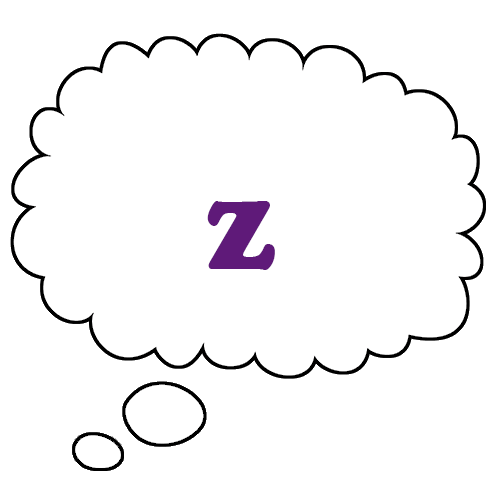
<style>
.page{position:relative;width:500px;height:500px;background:#ffffff}
.page>*{position:absolute;margin:0}
.t1{font:100px "CooperBlack";color:#5f1a79}
</style>
<div class="page">
<p class="t1" style="left:207px;top:201px;width:68px;height:69px">Z</p>
</div>
